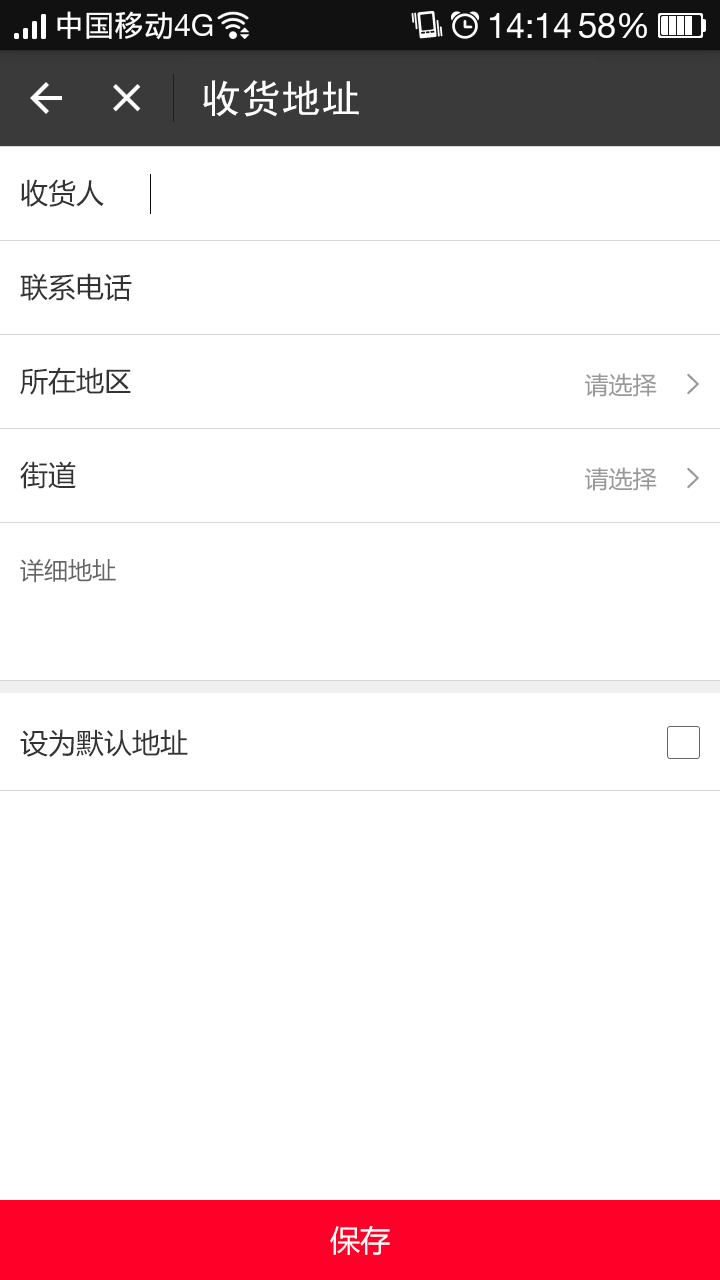
<style>
.page{position:relative;width:720px;height:1280px;background:#ffffff}
.page>*{position:absolute;margin:0}
.t1{font:40px "SimHei";color:#ffffff}
.t2{font:28px "MicrosoftYaHei";color:#333333}
.t3{font:24px "MicrosoftYaHei";color:#999999}
.t4{font:24px "MicrosoftYaHei";color:#666666}
.t5{font:30px "MicrosoftYaHei";color:#ffffff}
</style>
<div class="page">
<p class="t1" style="left:203px;top:80px;width:156px;height:37px">收货地址</p>
<p class="t2" style="left:21px;top:179px;width:83px;height:28px">收货人</p>
<p class="t2" style="left:20px;top:273px;width:112px;height:28px">联系电话</p>
<p class="t2" style="left:20px;top:367px;width:111px;height:28px">所在地区</p>
<p class="t3" style="left:585px;top:373px;width:72px;height:24px">请选择</p>
<p class="t2" style="left:20px;top:461px;width:56px;height:28px">街道</p>
<p class="t3" style="left:585px;top:467px;width:72px;height:24px">请选择</p>
<p class="t4" style="left:20px;top:558px;width:96px;height:25px">详细地址</p>
<p class="t2" style="left:20px;top:729px;width:168px;height:28px">设为默认地址</p>
<p class="t5" style="left:330px;top:1226px;width:60px;height:29px">保存</p>
</div>
